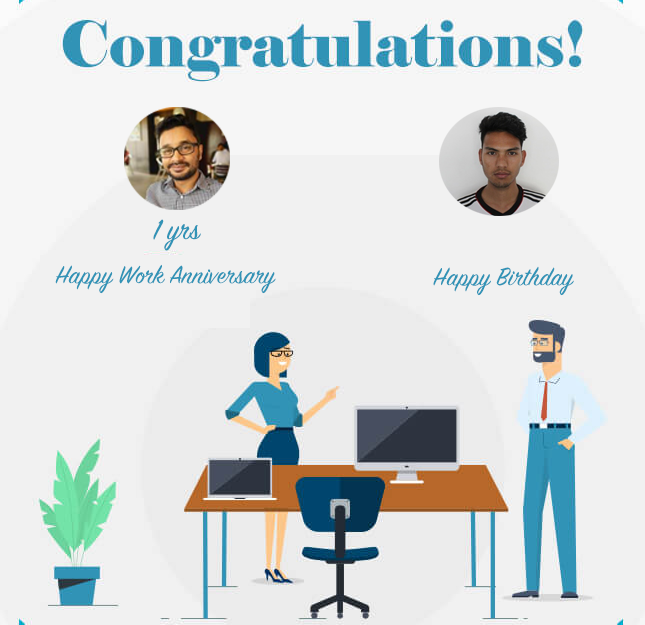
<style>
.page{position:relative;width:645px;height:625px;background:#f1f1f1}
.page>*{position:absolute;margin:0}
.t1{font:32px "SignPainter-HouseScript";color:#3193b6}
.t2{font:28px "SignPainter-HouseScript";color:#3193b6}
</style>
<div class="page">
<p class="t1" style="left:153px;top:219px;width:48px;height:32px">1 yrs</p>
<p class="t2" style="left:55px;top:264px;width:221px;height:30px">Happy Work Anniversary</p>
<p class="t2" style="left:433px;top:266px;width:141px;height:30px">Happy Birthday</p>
</div>
